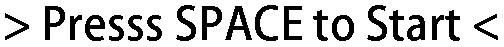
<style>
.page{position:relative;width:504px;height:47px;background:#ffffff}
.page>*{position:absolute;margin:0}
.t1{font:44px "AdobeFanHeitiStd-Bold";color:#000000}
</style>
<div class="page">
<p class="t1" style="left:5px;top:5px;width:493px;height:36px">&gt; Presss SPACE to Start &lt;</p>
</div>
